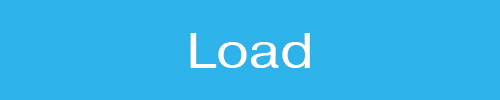
<style>
.page{position:relative;width:500px;height:100px;background:#2db2ea}
.page>*{position:absolute;margin:0}
.t1{font:48px "Helvetica";color:#ffffff;scale:1.2 1}
</style>
<div class="page">
<p class="t1" style="left:190px;top:33px;width:120px;height:35px">Load</p>
</div>
